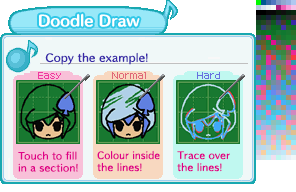
<style>
.page{position:relative;width:296px;height:192px;background:#f0f8f8}
.page>*{position:absolute;margin:0}
.t1{font:14px "HummingStd-B";letter-spacing:0.02em;color:#ffffff}
.t2{font:10px "HummingStd-D";letter-spacing:0.02em;color:#3828a8}
.t3{font:9px/12px "HummingStd-D";letter-spacing:0.02em;color:#e00088;scale:0.95 1}
.t4{font:9px/12px "HummingStd-D";letter-spacing:0.02em;color:#e00088}
</style>
<div class="page">
<p class="t1" style="left:39px;top:13px;width:101px;height:14px">Doodle Draw</p>
<p class="t2" style="left:45px;top:52px;width:103px;height:13px">Copy the example!</p>
<p class="t3" style="left:97px;top:150px;width:63px;height:22px">Colour inside<br><span class="t4">the lines!</span></p>
<p class="t4" style="left:18px;top:151px;width:60px;height:21px">Touch to fill<br>in a section!</p>
<p class="t4" style="left:177px;top:151px;width:53px;height:21px">Trace over<br>the lines!</p>
</div>
